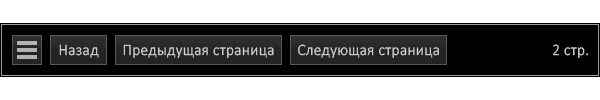
<style>
.page{position:relative;width:600px;height:100px;background:#ffffff}
.page>*{position:absolute;margin:0}
.t1{font:16px "Calibri-Light";letter-spacing:0.02em;color:#d7d7d7;scale:0.96 1}
</style>
<div class="page">
<p class="t1" style="left:59px;top:44px;width:40px;height:14px">Назад</p>
<p class="t1" style="left:123px;top:44px;width:151px;height:14px">Предыдущая страница</p>
<p class="t1" style="left:298px;top:44px;width:141px;height:14px">Следующая страница</p>
<p class="t1" style="left:553px;top:44px;width:35px;height:14px">2 стр.</p>
</div>
